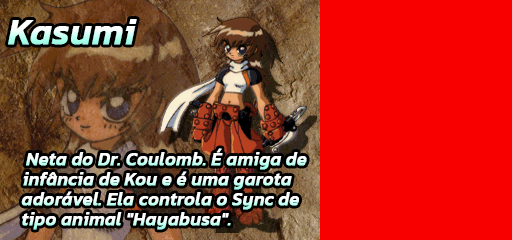
<style>
.page{position:relative;width:512px;height:240px;background:#f80000}
.page>*{position:absolute;margin:0}
.t1{font:36px "Kanit-MediumItalic";font-weight:bold}
.t2{font:18px "Kanit-MediumItalic";font-weight:bold}
</style>
<div class="page">
<p class="t1" style="left:8px;top:19px;width:129px;height:26px">Kasumi</p>
<p class="t2" style="left:26px;top:148px;width:281px;height:22px">Neta do Dr. Coulomb. É amiga de</p>
<p class="t2" style="left:23px;top:171px;width:269px;height:19px">infância de Kou e é uma garota</p>
<p class="t2" style="left:21px;top:191px;width:278px;height:19px">adorável. Ela controla o Sync de</p>
<p class="t2" style="left:22px;top:212px;width:209px;height:18px">tipo animal "Hayabusa".</p>
</div>
